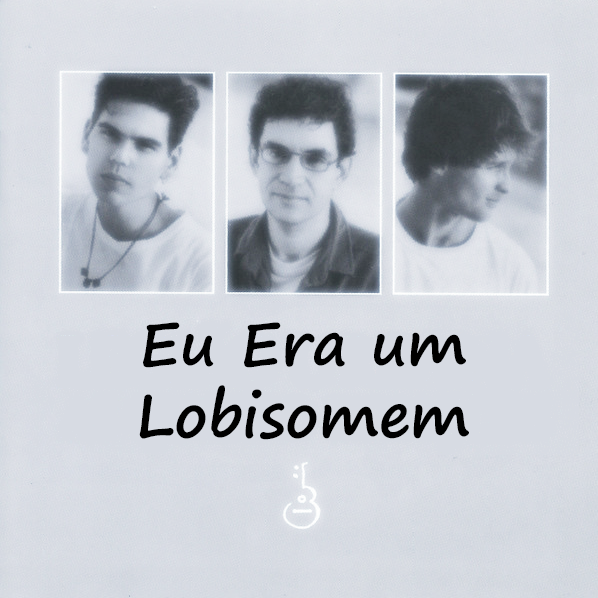
<style>
.page{position:relative;width:598px;height:598px}
.page>*{position:absolute;margin:0}
.t1{font:60px "SegoePrint-Bold";color:#000000}
</style>
<div class="page">
<p class="t1" style="left:139px;top:322px;width:330px;height:118px;text-align:center">Eu Era um Lobisomem Juvenil</p>
</div>
